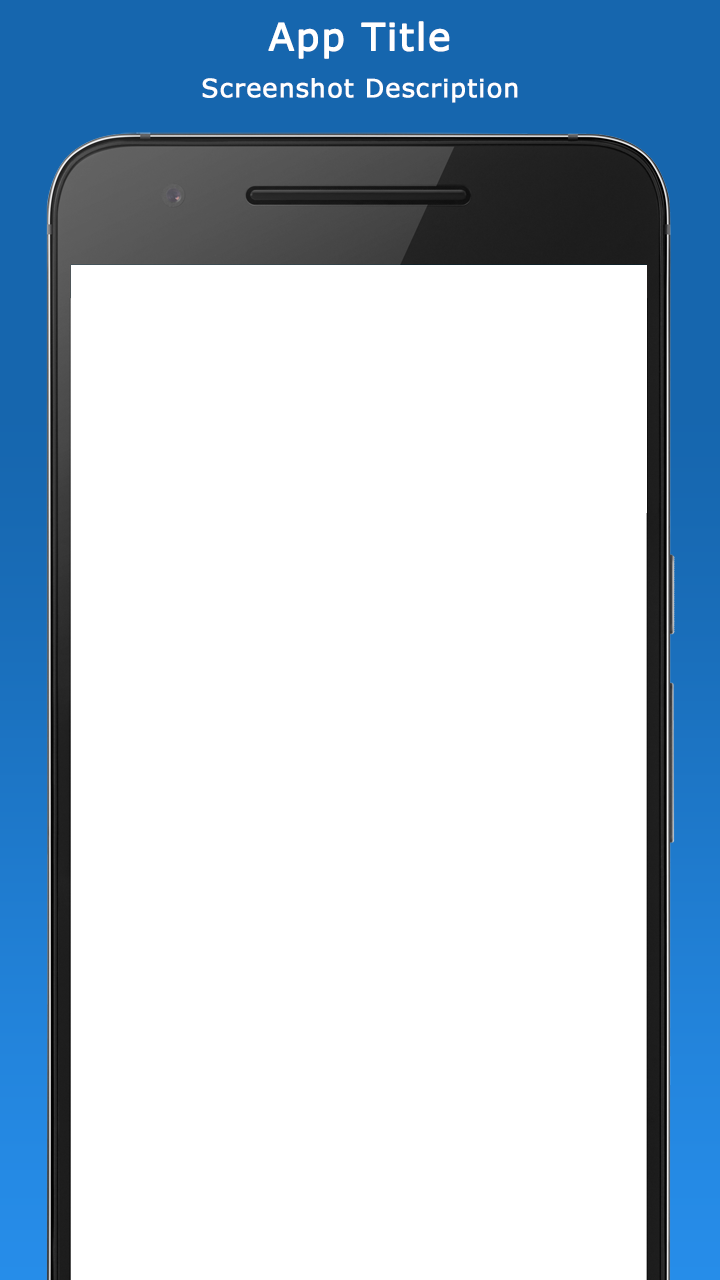
<style>
.page{position:relative;width:720px;height:1280px;background:#ffffff}
.page>*{position:absolute;margin:0}
.t1{font:37.5px "Verdana";letter-spacing:0.025em;color:#ffffff;font-weight:bold}
.t2{font:25px "Verdana";letter-spacing:0.025em;color:#ffffff;font-weight:bold}
</style>
<div class="page">
<p class="t1" style="left:268px;top:21px;width:182px;height:38px">App Title</p>
<p class="t2" style="left:202px;top:78px;width:316px;height:25px">Screenshot Description</p>
</div>
